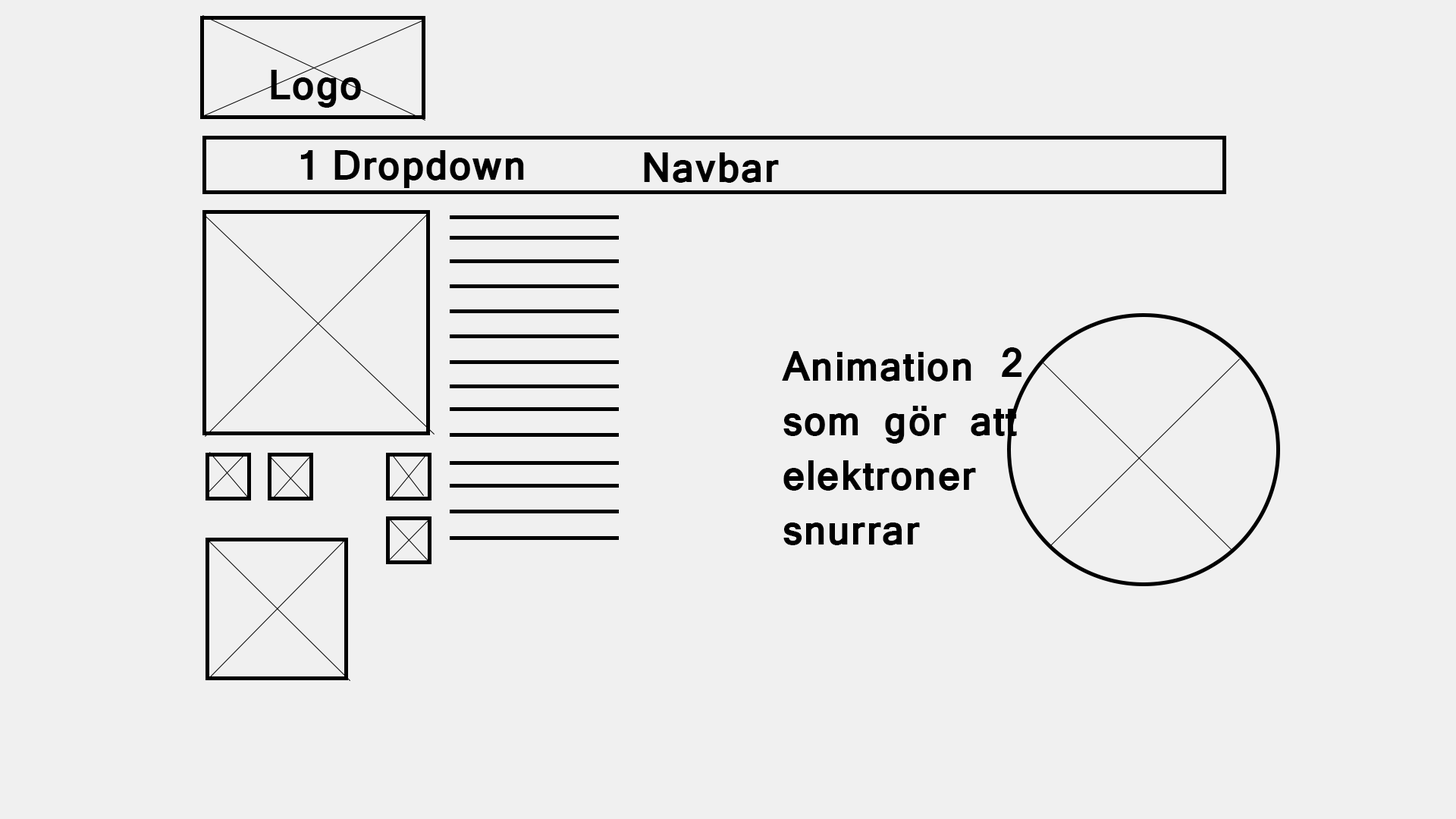
<style>
.page{position:relative;width:1456px;height:819px;background:#f0f0f0}
.page>*{position:absolute;margin:0}
.t1{font:45.5px "Latha-Bold";color:#000000}
</style>
<div class="page">
<p class="t1" style="left:271px;top:70px;width:90px;height:38px">Logo</p>
<p class="t1" style="left:300px;top:150px;width:13px;height:30px">1</p>
<p class="t1" style="left:334px;top:150px;width:190px;height:38px">Dropdown</p>
<p class="t1" style="left:644px;top:152px;width:135px;height:31px">Navbar</p>
<p class="t1" style="left:782px;top:351px;width:235px;height:194px">Animation som gör att elektroner snurrar</p>
<p class="t1" style="left:1002px;top:347px;width:19px;height:30px">2</p>
</div>
